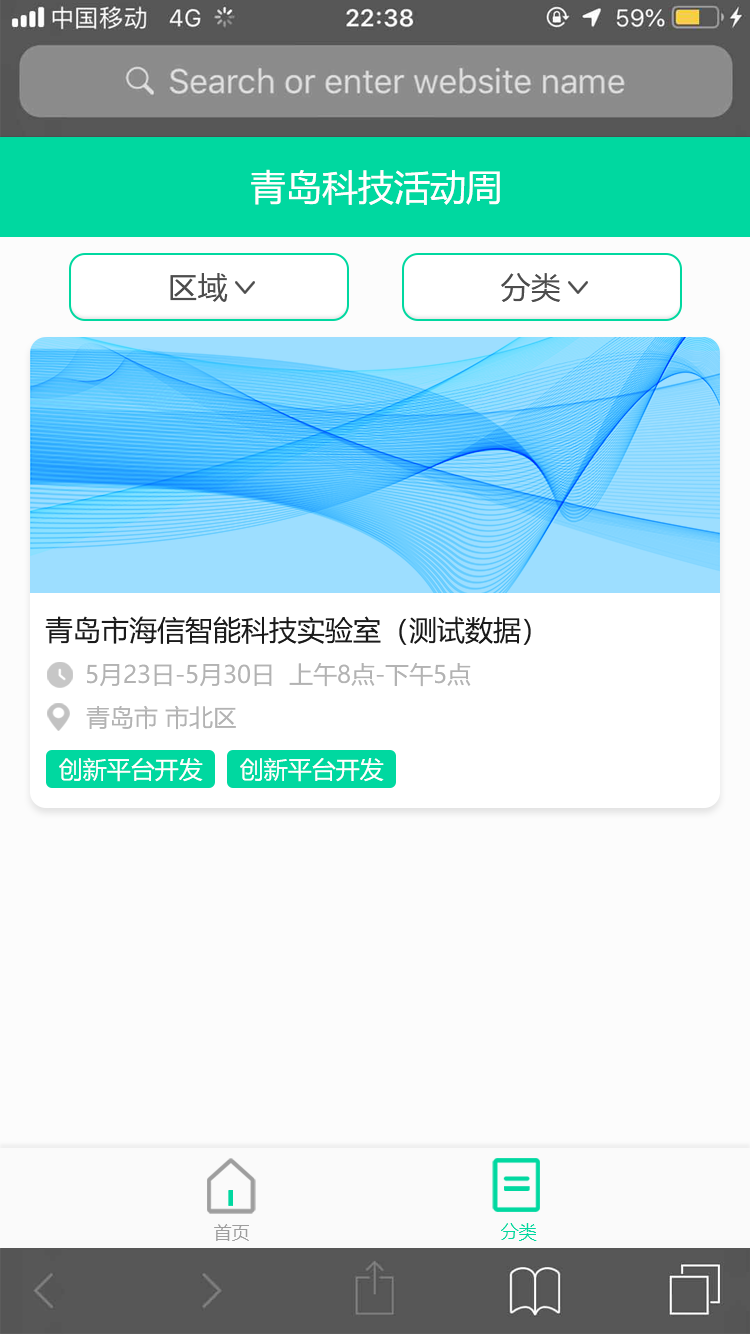
<style>
.page{position:relative;width:750px;height:1334px;background:#fcfcfc}
.page>*{position:absolute;margin:0}
.t1{font:36px "MicrosoftYaHei";color:#ffffff}
.t2{font:30px "MicrosoftYaHei";color:#4d4d4d}
.t3{font:28px "MicrosoftYaHei";color:#1a1a1a}
.t4{font:24px "MicrosoftYaHei";color:#b3b3b3}
.t5{font:24px "MicrosoftYaHei";color:#ffffff}
.t6{font:18px "MicrosoftYaHei";color:#9e9e9e}
.t7{font:18px "MicrosoftYaHei";color:#00d8a0}
</style>
<div class="page">
<p class="t1" style="left:251px;top:169px;width:249px;height:36px">青岛科技活动周</p>
<p class="t2" style="left:170px;top:273px;width:58px;height:29px">区域</p>
<p class="t2" style="left:501px;top:273px;width:60px;height:30px">分类</p>
<p class="t3" style="left:45px;top:616px;width:486px;height:29px">青岛市海信智能科技实验室（测试数据）</p>
<p class="t4" style="left:87px;top:663px;width:384px;height:24px">5月23日-5月30日  上午8点-下午5点</p>
<p class="t4" style="left:86px;top:705px;width:150px;height:25px">青岛市 市北区</p>
<p class="t5" style="left:59px;top:758px;width:144px;height:24px">创新平台开发</p>
<p class="t5" style="left:240px;top:758px;width:144px;height:24px">创新平台开发</p>
<p class="t6" style="left:214px;top:1224px;width:35px;height:17px">首页</p>
<p class="t7" style="left:501px;top:1223px;width:36px;height:18px">分类</p>
</div>
